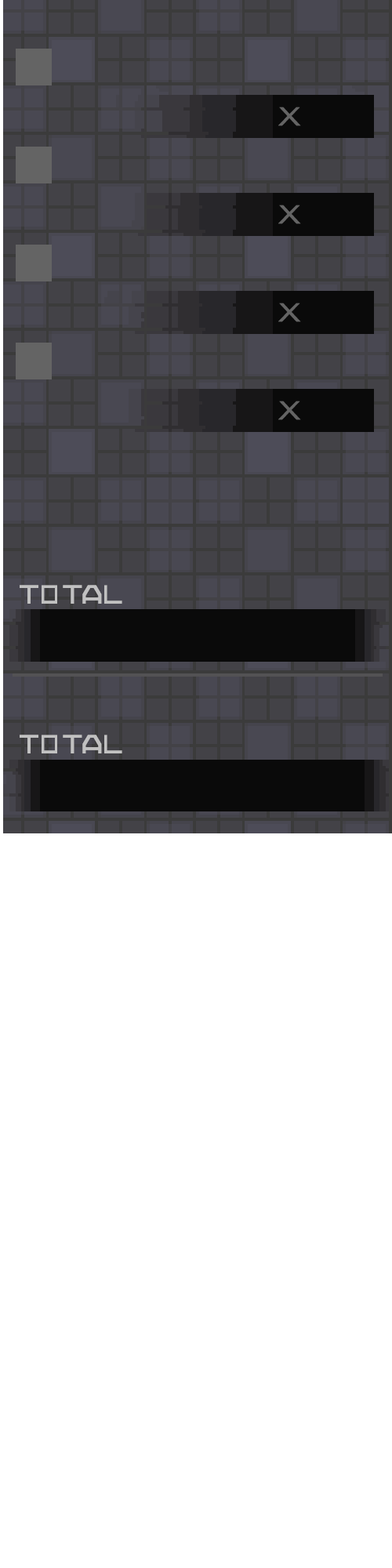
<style>
.page{position:relative;width:392px;height:1568px;background:#ffffff}
.page>*{position:absolute;margin:0}
.t1{font:25.2px "ArialMT";color:#646464;text-transform:uppercase;scale:1.32 1}
.t2{font:21.2px "7THDR2020Regular";letter-spacing:0.06em;color:#c1c1c1;text-transform:uppercase}
.t3{font:21.2px "7THDR2020Regular";letter-spacing:0.14em;color:#c1c1c1;text-transform:uppercase;scale:0.85 1}
.t4{font:21.2px "7THDR2020Regular";letter-spacing:-0.08em;color:#c1c1c1;text-transform:uppercase}
.t5{font:21.2px "7THDR2020Regular";letter-spacing:0.02em;color:#c1c1c1;text-transform:uppercase}
.t6{font:21.2px "7THDR2020Regular";color:#c1c1c1;text-transform:uppercase;scale:0.95 1}
</style>
<div class="page">
<p class="t1" style="left:278px;top:107px;width:23px;height:19px">X</p>
<p class="t1" style="left:278px;top:205px;width:23px;height:19px">X</p>
<p class="t1" style="left:278px;top:303px;width:23px;height:19px">X</p>
<p class="t1" style="left:278px;top:401px;width:23px;height:19px">X</p>
<p class="t2" style="left:20px;top:585px;width:102px;height:19px">T<span class="t3">O</span><span class="t4">T</span><span class="t5">A</span><span class="t6">L</span></p>
<p class="t2" style="left:20px;top:735px;width:102px;height:18px">T<span class="t3">O</span><span class="t4">T</span><span class="t5">A</span><span class="t6">L</span></p>
</div>
